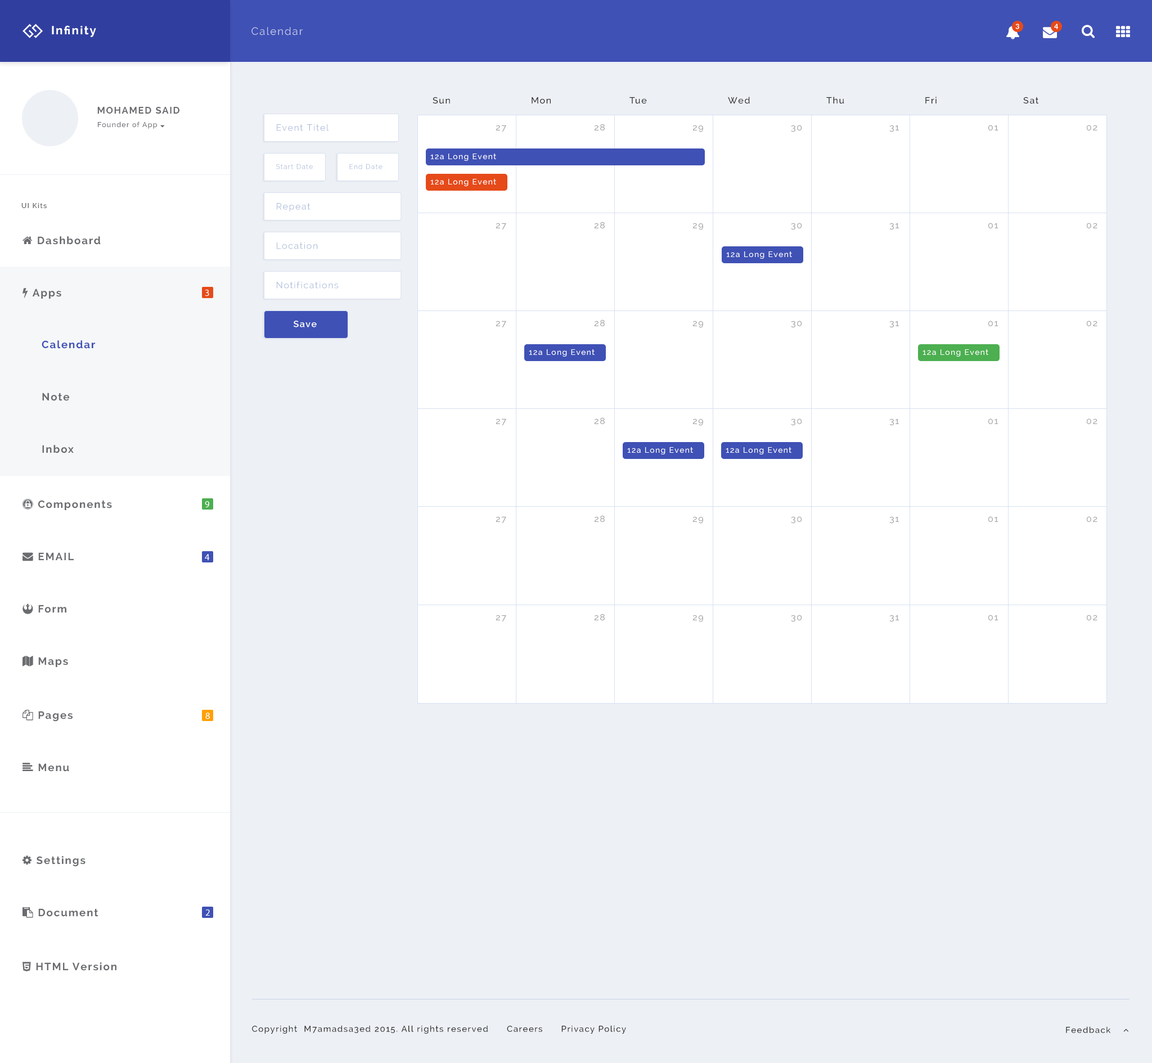
<style>
.page{position:relative;width:1152px;height:1063px;background:#ffffff}
.page>*{position:absolute;margin:0}
.t1{font:11.7px "Raleway-Bold";letter-spacing:0.1em;color:#ffffff}
.t2{font:10.5px "Raleway";letter-spacing:0.1em;color:#c5cae9}
.t3{font:7px "Lato-Bold";letter-spacing:0.1em;color:#ffffff}
.t4{font:9px "Raleway-Medium";letter-spacing:0.1em;color:#282828}
.t5{font:9.4px "Raleway-Bold";letter-spacing:0.1em;color:#6a6c6f}
.t6{font:9px "Raleway";letter-spacing:0.1em;color:#abbbd9}
.t7{font:9px "Raleway-Medium";letter-spacing:0.1em;color:#aaaaaa}
.t8{font:7.9px "Raleway-Medium";letter-spacing:0.1em;color:#ffffff}
.t9{font:6.8px "Raleway";letter-spacing:0.1em;color:#abbbd9}
.t10{font:7px "Raleway-SemiBold";letter-spacing:0.1em;color:#6a6c6f}
.t11{font:9.4px "MyriadPro-Regular";letter-spacing:0.1em;color:#ffffff}
.t12{font:9px "Raleway-SemiBold";letter-spacing:0.1em;color:#ffffff}
.t13{font:10.5px "Raleway-Bold";letter-spacing:0.1em;color:#3f51b5}
.t14{font:10.5px "Raleway-Bold";letter-spacing:0.1em;color:#6a6c6f}
.t15{font:8.4px "Raleway-Medium";letter-spacing:0.1em;color:#282828}
</style>
<div class="page">
<p class="t1" style="left:52px;top:25px;width:44px;height:12px">Infinity</p>
<p class="t2" style="left:251px;top:27px;width:52px;height:8px">Calendar</p>
<p class="t3" style="left:1015px;top:24px;width:4px;height:5px">3</p>
<p class="t3" style="left:1054px;top:24px;width:4px;height:5px">4</p>
<p class="t4" style="left:433px;top:97px;width:17px;height:7px">Sun</p>
<p class="t4" style="left:532px;top:97px;width:19px;height:7px">Mon</p>
<p class="t4" style="left:629px;top:97px;width:18px;height:7px">Tue</p>
<p class="t4" style="left:728px;top:97px;width:22px;height:7px">Wed</p>
<p class="t4" style="left:826px;top:97px;width:18px;height:7px">Thu</p>
<p class="t4" style="left:925px;top:97px;width:12px;height:7px">Fri</p>
<p class="t4" style="left:1023px;top:97px;width:16px;height:7px">Sat</p>
<p class="t5" style="left:97px;top:107px;width:82px;height:7px">MOHAMED SAID</p>
<p class="t6" style="left:277px;top:124px;width:52px;height:7px">Event Titel</p>
<p class="t7" style="left:496px;top:125px;width:10px;height:7px">27</p>
<p class="t7" style="left:594px;top:124px;width:11px;height:7px">28</p>
<p class="t7" style="left:692px;top:125px;width:11px;height:7px">29</p>
<p class="t7" style="left:791px;top:125px;width:11px;height:7px">30</p>
<p class="t7" style="left:889px;top:125px;width:10px;height:7px">31</p>
<p class="t7" style="left:988px;top:125px;width:10px;height:6px">01</p>
<p class="t7" style="left:1087px;top:125px;width:10px;height:6px">02</p>
<p class="t8" style="left:430px;top:154px;width:66px;height:7px">12a Long Event</p>
<p class="t9" style="left:276px;top:164px;width:37px;height:5px">Start Date</p>
<p class="t9" style="left:349px;top:164px;width:33px;height:5px">End Date</p>
<p class="t8" style="left:430px;top:179px;width:66px;height:7px">12a Long Event</p>
<p class="t10" style="left:21px;top:202px;width:26px;height:7px">UI Kits</p>
<p class="t6" style="left:277px;top:203px;width:33px;height:9px">Repeat</p>
<p class="t7" style="left:594px;top:222px;width:11px;height:7px">28</p>
<p class="t7" style="left:496px;top:223px;width:10px;height:7px">27</p>
<p class="t7" style="left:692px;top:223px;width:11px;height:7px">29</p>
<p class="t7" style="left:791px;top:223px;width:11px;height:7px">30</p>
<p class="t7" style="left:889px;top:223px;width:10px;height:7px">31</p>
<p class="t7" style="left:988px;top:223px;width:10px;height:6px">01</p>
<p class="t7" style="left:1087px;top:223px;width:10px;height:6px">02</p>
<p class="t6" style="left:277px;top:242px;width:41px;height:7px">Location</p>
<p class="t8" style="left:726px;top:251px;width:66px;height:8px">12a Long Event</p>
<p class="t6" style="left:277px;top:281px;width:62px;height:8px">Notifications</p>
<p class="t11" style="left:205px;top:290px;width:4px;height:6px">3</p>
<p class="t12" style="left:294px;top:321px;width:23px;height:6px">Save</p>
<p class="t7" style="left:496px;top:321px;width:10px;height:6px">27</p>
<p class="t7" style="left:594px;top:320px;width:11px;height:7px">28</p>
<p class="t7" style="left:692px;top:321px;width:11px;height:7px">29</p>
<p class="t7" style="left:791px;top:321px;width:11px;height:7px">30</p>
<p class="t7" style="left:889px;top:321px;width:10px;height:7px">31</p>
<p class="t7" style="left:988px;top:321px;width:10px;height:6px">01</p>
<p class="t7" style="left:1087px;top:321px;width:10px;height:6px">02</p>
<p class="t13" style="left:42px;top:340px;width:53px;height:9px">Calendar</p>
<p class="t8" style="left:529px;top:349px;width:66px;height:8px">12a Long Event</p>
<p class="t8" style="left:922px;top:349px;width:66px;height:8px">12a Long Event</p>
<p class="t14" style="left:42px;top:393px;width:27px;height:8px">Note</p>
<p class="t7" style="left:496px;top:418px;width:10px;height:7px">27</p>
<p class="t7" style="left:594px;top:417px;width:11px;height:8px">28</p>
<p class="t7" style="left:692px;top:418px;width:11px;height:8px">29</p>
<p class="t7" style="left:791px;top:418px;width:11px;height:8px">30</p>
<p class="t7" style="left:889px;top:418px;width:10px;height:8px">31</p>
<p class="t7" style="left:988px;top:418px;width:10px;height:7px">01</p>
<p class="t7" style="left:1087px;top:418px;width:10px;height:7px">02</p>
<p class="t14" style="left:42px;top:445px;width:32px;height:8px">Inbox</p>
<p class="t8" style="left:627px;top:447px;width:66px;height:7px">12a Long Event</p>
<p class="t8" style="left:726px;top:447px;width:65px;height:7px">12a Long Event</p>
<p class="t11" style="left:205px;top:501px;width:4px;height:7px">9</p>
<p class="t7" style="left:496px;top:516px;width:10px;height:7px">27</p>
<p class="t7" style="left:594px;top:515px;width:11px;height:8px">28</p>
<p class="t7" style="left:692px;top:516px;width:11px;height:8px">29</p>
<p class="t7" style="left:791px;top:516px;width:11px;height:8px">30</p>
<p class="t7" style="left:889px;top:516px;width:10px;height:8px">31</p>
<p class="t7" style="left:988px;top:516px;width:10px;height:7px">01</p>
<p class="t7" style="left:1087px;top:516px;width:10px;height:7px">02</p>
<p class="t11" style="left:205px;top:554px;width:5px;height:6px">4</p>
<p class="t7" style="left:496px;top:615px;width:10px;height:7px">27</p>
<p class="t7" style="left:594px;top:614px;width:11px;height:7px">28</p>
<p class="t7" style="left:692px;top:615px;width:11px;height:7px">29</p>
<p class="t7" style="left:791px;top:615px;width:11px;height:7px">30</p>
<p class="t7" style="left:889px;top:615px;width:10px;height:7px">31</p>
<p class="t7" style="left:988px;top:615px;width:10px;height:6px">01</p>
<p class="t7" style="left:1087px;top:615px;width:10px;height:6px">02</p>
<p class="t11" style="left:205px;top:713px;width:5px;height:6px">8</p>
<p class="t11" style="left:205px;top:910px;width:5px;height:6px">2</p>
<p class="t15" style="left:252px;top:1025px;width:374px;height:9px">Copyright  M7amadsa3ed 2015. All rights reserved      Careers      Privacy Policy</p>
</div>
